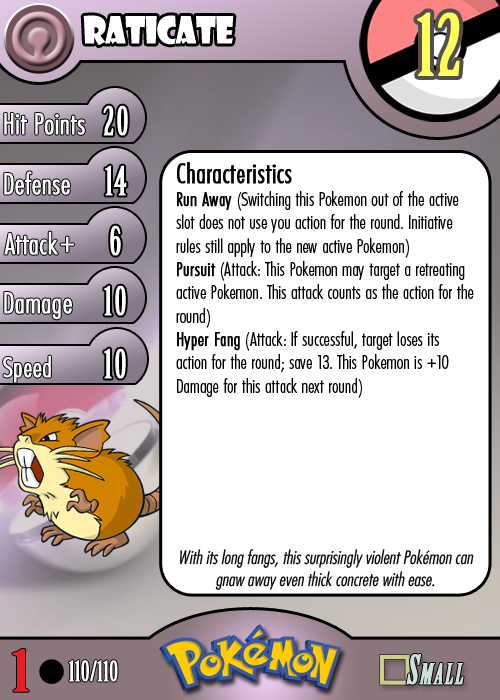
<style>
.page{position:relative;width:500px;height:700px;background:#ffffff}
.page>*{position:absolute;margin:0}
.t1{font:36.7px "ShowcardGothic-Reg";letter-spacing:-0.025em;color:#ffffff;scale:0.91 1}
.t2{font:83.3px "BirchStd";letter-spacing:0.025em;color:#fffd59;font-weight:bold}
.t3{font:27.8px "Futura-CondensedLight";color:#ffffff;font-weight:bold}
.t4{font:38.9px "BirchStd";letter-spacing:0.035em;color:#ffffff;font-weight:bold}
.t5{font:19.4px "FuturaCondensedBQ-Light";color:#010101}
.t6{font:27.8px "FuturaCondensedBQ-Light";color:#010101;font-weight:bold}
.t7{font:19.4px "FuturaCondensedBQ-Light";color:#010101;font-weight:bold}
.t8{font:30.6px "Futura-CondensedLight";color:#ffffff;font-weight:bold}
.t9{font:27.8px "FuturaCondensedBQ-Light";color:#ffffff;font-weight:bold}
.t10{font:18.1px "Futura-CondensedLight";color:#010101;font-style:italic}
.t11{font:55.6px "BirchStd";color:#ed1c24;font-weight:bold;scale:1.5 1}
.t12{font:27.8px "BirchStd";color:#ffffff;font-weight:bold}
</style>
<div class="page">
<p class="t1" style="left:83px;top:15px;width:151px;height:31px">raticate</p>
<p class="t2" style="left:417px;top:12px;width:43px;height:64px">12</p>
<p class="t3" style="left:4px;top:113px;width:81px;height:22px">Hit Points</p>
<p class="t4" style="left:103px;top:105px;width:25px;height:31px">20</p>
<p class="t3" style="left:4px;top:171px;width:66px;height:24px">Defense</p>
<p class="t4" style="left:105px;top:165px;width:22px;height:31px">14</p>
<p class="t5" style="left:176px;top:162px;width:298px;height:236px"><span class="t6">Characteristics<br></span><span class="t7">Run Away</span> (Switching this Pokemon out of the active slot does not use you action for the round. Initiative rules still apply to the new active Pokemon)<br><span class="t7">Pursuit</span> (Attack: This Pokemon may target a retreating active Pokemon. This attack counts as the action for the round)<br><span class="t7">Hyper Fang</span> (Attack: If successful, target loses its action for the round; save 13. This Pokemon is +10 Damage for this attack next round)</p>
<p class="t3" style="left:4px;top:231px;width:54px;height:24px">Attack</p>
<p class="t4" style="left:110px;top:225px;width:11px;height:31px">6</p>
<p class="t8" style="left:60px;top:236px;width:14px;height:17px">+</p>
<p class="t3" style="left:4px;top:292px;width:68px;height:28px">Damage</p>
<p class="t4" style="left:104px;top:285px;width:22px;height:31px">10</p>
<p class="t4" style="left:104px;top:348px;width:22px;height:31px">10</p>
<p class="t9" style="left:3px;top:355px;width:48px;height:28px">Speed</p>
<p class="t10" style="left:180px;top:549px;width:294px;height:41px;text-align:center">With its long fangs, this surprisingly violent Pokémon can gnaw away even thick concrete with ease.</p>
<p class="t11" style="left:12px;top:649px;width:17px;height:43px">1</p>
<p class="t12" style="left:68px;top:660px;width:50px;height:22px">110/110</p>
</div>
